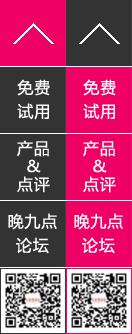
<style>
.page{position:relative;width:132px;height:334px;background:#ee0065}
.page>*{position:absolute;margin:0}
.t1{font:16px/24px "MicrosoftYaHei";letter-spacing:0.05em;color:#ffffff}
.t2{font:16px/18px "MicrosoftYaHei";letter-spacing:0.05em;color:#ffffff}
</style>
<div class="page">
<p class="t1" style="left:17px;top:79px;width:33px;height:41px">免费<br>试用</p>
<p class="t1" style="left:83px;top:79px;width:33px;height:41px">免费<br>试用</p>
<p class="t2" style="left:17px;top:140px;width:33px;height:53px;text-align:center">产品<br>&amp;<br>点评</p>
<p class="t2" style="left:83px;top:140px;width:33px;height:53px;text-align:center">产品<br>&amp;<br>点评</p>
<p class="t1" style="left:8px;top:213px;width:49px;height:41px;text-align:center">晚九点<br>论坛</p>
<p class="t1" style="left:74px;top:213px;width:49px;height:41px;text-align:center">晚九点<br>论坛</p>
</div>
